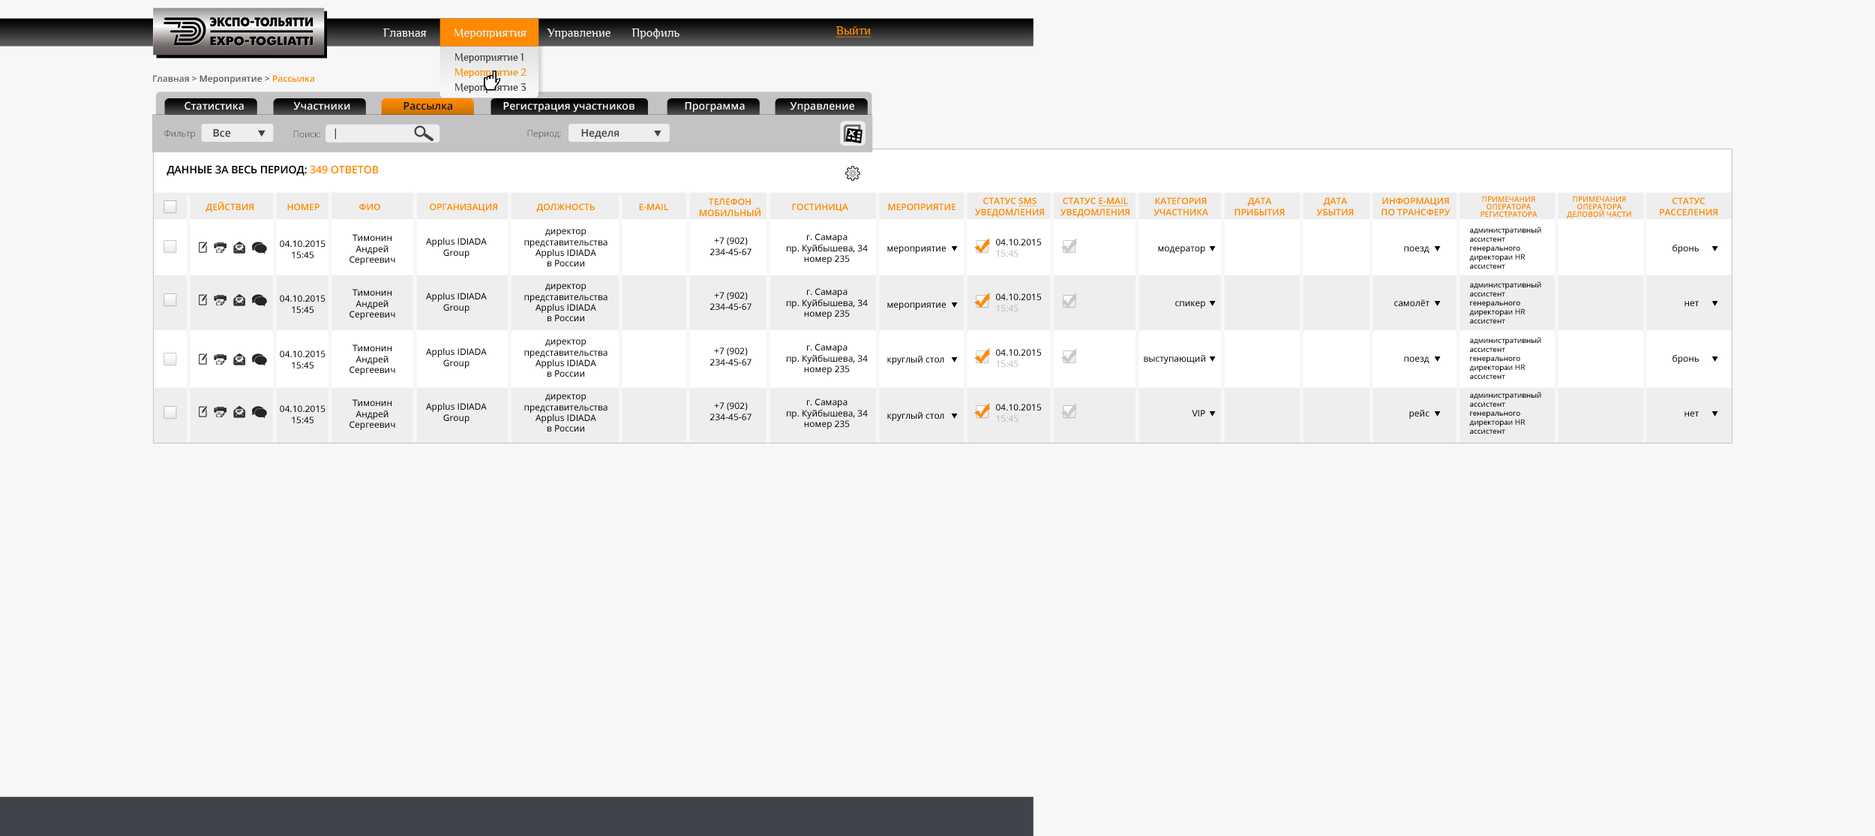
<style>
.page{position:relative;width:1875px;height:836px;background:#f7f7f7}
.page>*{position:absolute;margin:0}
.t1{font:12.4px "Philosopher";color:#e7eff1}
.t2{font:12px "Philosopher";color:#ff8a00;text-decoration:underline}
.t3{font:10.8px/15px "Philosopher";color:#40434a}
.t4{font:10.8px/15px "Philosopher";color:#ff8a00}
.t5{font:9px "OpenSans-Semibold";color:#615a59}
.t6{font:9px "OpenSans-Semibold";color:#ff8a00}
.t7{font:10.5px "OpenSans-Semibold";color:#f7f7f7}
.t8{font:10.5px "OpenSans-Semibold";color:#181818}
.t9{font:9px "OpenSans-Light"}
.t10{font:10.5px "OpenSans-Semibold";color:#40434a}
.t11{font:9px "OpenSans-Light";color:#40434a}
.t12{font:10.5px "OpenSans-Semibold";color:#000000;text-transform:uppercase}
.t13{font:10.5px "OpenSans-Semibold";color:#ff8a00;text-transform:uppercase}
.t14{font:9px "OpenSans-Semibold";color:#ff8a00;text-transform:uppercase}
.t15{font:9px "OpenSans-Semibold";color:#ff8a00;text-transform:uppercase;text-decoration:underline}
.t16{font:7.5px/7.5px "OpenSans-Semibold";color:#ff8a00;text-transform:uppercase}
.t17{font:9px "OpenSans";color:#000000}
.t18{font:7.5px "OpenSans";color:#000000}
.t19{font:9px "OpenSans";color:#b9b7b7}
</style>
<div class="page">
<p class="t1" style="left:383px;top:29px;width:297px;height:10px">Главная         Мероприятия       Управление       Профиль</p>
<p class="t2" style="left:836px;top:26px;width:36px;height:12px">Выйти</p>
<p class="t3" style="left:455px;top:53px;width:72px;height:40px">Мероприятие 1<br><span class="t4">Мероприятие 2<br></span>Мероприятие 3</p>
<p class="t5" style="left:153px;top:75px;width:161px;height:9px">Главная &gt; Мероприятие &gt; <span class="t6">Рассылка</span></p>
<p class="t7" style="left:185px;top:101px;width:59px;height:9px">Статистика</p>
<p class="t7" style="left:293px;top:102px;width:57px;height:8px">Участники</p>
<p class="t8" style="left:404px;top:102px;width:48px;height:8px">Рассылка</p>
<p class="t7" style="left:503px;top:102px;width:132px;height:11px">Регистрация участников</p>
<p class="t7" style="left:685px;top:102px;width:60px;height:11px">Программа</p>
<p class="t7" style="left:790px;top:102px;width:64px;height:11px">Управление</p>
<p class="t9" style="left:164px;top:130px;width:31px;height:9px">Фильтр</p>
<p class="t10" style="left:213px;top:129px;width:17px;height:8px">Все</p>
<p class="t11" style="left:293px;top:131px;width:27px;height:6px">Поиск:</p>
<p class="t10" style="left:335px;top:128px;width:1px;height:12px">|</p>
<p class="t9" style="left:527px;top:130px;width:34px;height:9px">Период:</p>
<p class="t10" style="left:581px;top:129px;width:38px;height:10px">Неделя</p>
<p class="t12" style="left:167px;top:165px;width:212px;height:11px">данные за весь период: <span class="t13">349 ответов</span></p>
<p class="t14" style="left:975px;top:197px;width:69px;height:21px;text-align:center">Статус <span class="t15">SMS<br></span>уведомления</p>
<p class="t14" style="left:1061px;top:197px;width:69px;height:21px;text-align:center">Статус <span class="t15">e-mail<br></span>уведомления</p>
<p class="t14" style="left:1154px;top:197px;width:54px;height:18px;text-align:center">категория<br>участника</p>
<p class="t14" style="left:1235px;top:197px;width:50px;height:18px;text-align:center">дата<br>прибытия</p>
<p class="t14" style="left:1316px;top:197px;width:38px;height:18px;text-align:center">дата<br>убытия</p>
<p class="t14" style="left:1382px;top:197px;width:69px;height:18px;text-align:center">информация<br>по трансферу</p>
<p class="t16" style="left:1481px;top:196px;width:57px;height:21px;text-align:center">примечания<br>оператора<br>регистратора</p>
<p class="t16" style="left:1567px;top:196px;width:64px;height:22px;text-align:center">примечания<br>оператора<br>деловой части</p>
<p class="t14" style="left:1660px;top:197px;width:58px;height:18px;text-align:center">статус<br>расселения</p>
<p class="t14" style="left:206px;top:201px;width:48px;height:11px">действия</p>
<p class="t14" style="left:287px;top:203px;width:33px;height:7px">номер</p>
<p class="t14" style="left:359px;top:203px;width:21px;height:7px">фио</p>
<p class="t14" style="left:430px;top:203px;width:67px;height:9px">Организация</p>
<p class="t14" style="left:536px;top:203px;width:59px;height:9px">должность</p>
<p class="t14" style="left:639px;top:203px;width:29px;height:7px">E-mail</p>
<p class="t14" style="left:700px;top:198px;width:61px;height:18px;text-align:center">телефон<br>мобильный</p>
<p class="t14" style="left:792px;top:203px;width:56px;height:9px">гостиница</p>
<p class="t14" style="left:888px;top:203px;width:68px;height:7px">мероприятие</p>
<p class="t17" style="left:524px;top:229px;width:84px;height:37px;text-align:center">директор<br>представительства<br>Applus IDIADA<br>в России</p>
<p class="t17" style="left:787px;top:233px;width:81px;height:31px;text-align:center">г. Самара<br>пр. Куйбышева, 34<br>номер 235</p>
<p class="t18" style="left:1469px;top:227px;width:72px;height:42px">административный<br>ассистент<br>генерального<br>директораи HR<br>ассистент</p>
<p class="t17" style="left:280px;top:240px;width:46px;height:18px;text-align:center">04.10.2015<br>15:45</p>
<p class="t17" style="left:350px;top:234px;width:45px;height:31px;text-align:center">Тимонин<br>Андрей<br>Сергеевич</p>
<p class="t17" style="left:426px;top:238px;width:61px;height:20px;text-align:center">Applus IDIADA<br>Group</p>
<p class="t17" style="left:710px;top:237px;width:42px;height:18px;text-align:center">+7 (902)<br>234-45-67</p>
<p class="t17" style="left:996px;top:239px;width:45px;height:18px">04.10.2015<br><span class="t19">15:45</span></p>
<p class="t17" style="left:1673px;top:245px;width:26px;height:9px">бронь</p>
<p class="t17" style="left:887px;top:246px;width:59px;height:8px">мероприятие</p>
<p class="t17" style="left:1158px;top:246px;width:47px;height:8px">модератор</p>
<p class="t17" style="left:1404px;top:246px;width:26px;height:8px">поезд</p>
<p class="t18" style="left:1469px;top:281px;width:72px;height:42px">административный<br>ассистент<br>генерального<br>директораи HR<br>ассистент</p>
<p class="t17" style="left:350px;top:289px;width:45px;height:31px;text-align:center">Тимонин<br>Андрей<br>Сергеевич</p>
<p class="t17" style="left:426px;top:293px;width:61px;height:20px;text-align:center">Applus IDIADA<br>Group</p>
<p class="t17" style="left:524px;top:284px;width:84px;height:37px;text-align:center">директор<br>представительства<br>Applus IDIADA<br>в России</p>
<p class="t17" style="left:710px;top:292px;width:42px;height:18px;text-align:center">+7 (902)<br>234-45-67</p>
<p class="t17" style="left:787px;top:288px;width:81px;height:31px;text-align:center">г. Самара<br>пр. Куйбышева, 34<br>номер 235</p>
<p class="t17" style="left:996px;top:293px;width:45px;height:18px">04.10.2015<br><span class="t19">15:45</span></p>
<p class="t17" style="left:280px;top:295px;width:46px;height:18px;text-align:center">04.10.2015<br>15:45</p>
<p class="t17" style="left:887px;top:302px;width:59px;height:8px">мероприятие</p>
<p class="t17" style="left:1175px;top:301px;width:30px;height:7px">спикер</p>
<p class="t17" style="left:1394px;top:299px;width:36px;height:7px">самолёт</p>
<p class="t17" style="left:1685px;top:301px;width:14px;height:5px">нет</p>
<p class="t17" style="left:524px;top:339px;width:84px;height:38px;text-align:center">директор<br>представительства<br>Applus IDIADA<br>в России</p>
<p class="t18" style="left:1469px;top:337px;width:72px;height:42px">административный<br>ассистент<br>генерального<br>директораи HR<br>ассистент</p>
<p class="t17" style="left:280px;top:350px;width:46px;height:18px;text-align:center">04.10.2015<br>15:45</p>
<p class="t17" style="left:350px;top:344px;width:45px;height:31px;text-align:center">Тимонин<br>Андрей<br>Сергеевич</p>
<p class="t17" style="left:426px;top:348px;width:61px;height:20px;text-align:center">Applus IDIADA<br>Group</p>
<p class="t17" style="left:710px;top:347px;width:42px;height:18px;text-align:center">+7 (902)<br>234-45-67</p>
<p class="t17" style="left:787px;top:344px;width:81px;height:30px;text-align:center">г. Самара<br>пр. Куйбышева, 34<br>номер 235</p>
<p class="t17" style="left:996px;top:349px;width:45px;height:18px">04.10.2015<br><span class="t19">15:45</span></p>
<p class="t17" style="left:887px;top:356px;width:57px;height:9px">круглый стол</p>
<p class="t17" style="left:1144px;top:355px;width:61px;height:9px">выступающий</p>
<p class="t17" style="left:1404px;top:356px;width:26px;height:8px">поезд</p>
<p class="t17" style="left:1673px;top:355px;width:26px;height:9px">бронь</p>
<p class="t17" style="left:350px;top:399px;width:45px;height:31px;text-align:center">Тимонин<br>Андрей<br>Сергеевич</p>
<p class="t17" style="left:524px;top:394px;width:84px;height:37px;text-align:center">директор<br>представительства<br>Applus IDIADA<br>в России</p>
<p class="t17" style="left:787px;top:398px;width:81px;height:31px;text-align:center">г. Самара<br>пр. Куйбышева, 34<br>номер 235</p>
<p class="t18" style="left:1469px;top:392px;width:72px;height:42px">административный<br>ассистент<br>генерального<br>директораи HR<br>ассистент</p>
<p class="t17" style="left:280px;top:405px;width:46px;height:18px;text-align:center">04.10.2015<br>15:45</p>
<p class="t17" style="left:426px;top:403px;width:61px;height:20px;text-align:center">Applus IDIADA<br>Group</p>
<p class="t17" style="left:710px;top:402px;width:42px;height:18px;text-align:center">+7 (902)<br>234-45-67</p>
<p class="t17" style="left:887px;top:412px;width:57px;height:9px">круглый стол</p>
<p class="t17" style="left:996px;top:404px;width:45px;height:18px">04.10.2015<br><span class="t19">15:45</span></p>
<p class="t17" style="left:1192px;top:410px;width:13px;height:6px">VIP</p>
<p class="t17" style="left:1409px;top:410px;width:21px;height:9px">рейс</p>
<p class="t17" style="left:1685px;top:411px;width:14px;height:5px">нет</p>
</div>
